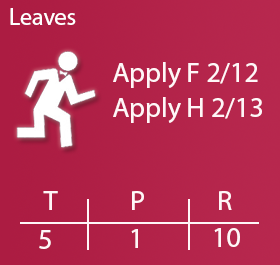
<style>
.page{position:relative;width:280px;height:265px}
.page>*{position:absolute;margin:0}
.t1{font:24px "MyriadHebrew-Regular";color:#fefefe}
.t2{font:28px "MyriadHebrew-Regular";color:#fff6f8}
</style>
<div class="page">
<p class="t1" style="left:10px;top:8px;width:66px;height:17px">Leaves</p>
<p class="t2" style="left:113px;top:62px;width:145px;height:26px">Apply F 2/12</p>
<p class="t2" style="left:113px;top:97px;width:149px;height:26px">Apply H 2/13</p>
<p class="t2" style="left:43px;top:191px;width:15px;height:19px">T</p>
<p class="t2" style="left:132px;top:191px;width:12px;height:19px">P</p>
<p class="t2" style="left:219px;top:191px;width:13px;height:19px">R</p>
<p class="t2" style="left:39px;top:230px;width:12px;height:19px">5</p>
<p class="t2" style="left:131px;top:229px;width:7px;height:19px">1</p>
<p class="t2" style="left:214px;top:228px;width:26px;height:19px">10</p>
</div>
